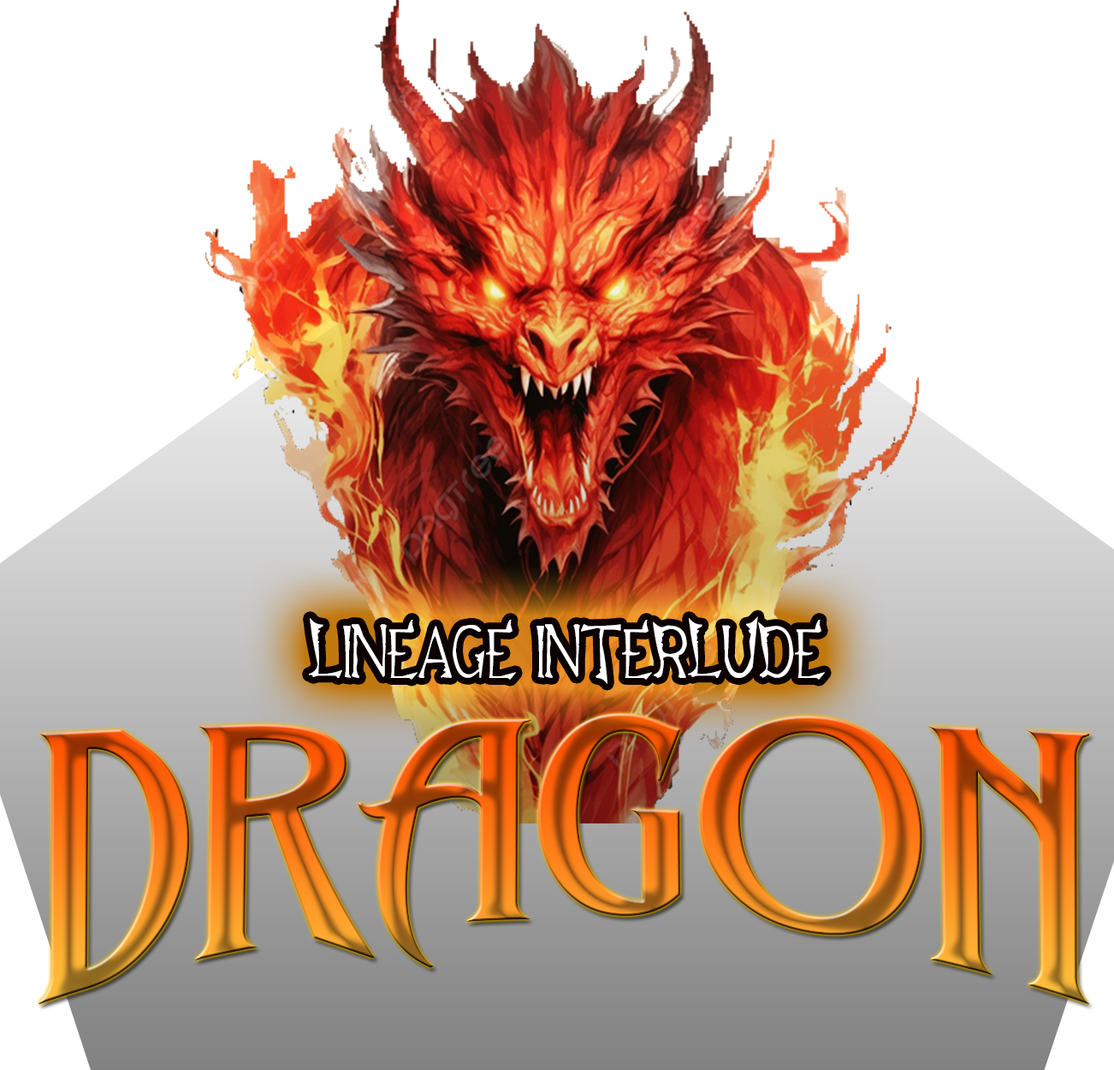
<style>
.page{position:relative;width:1114px;height:1070px;background:#ffffff}
.page>*{position:absolute;margin:0}
.t1{font:72.6px "Lineage2Font";color:#ffffff}
.t2{font:385.1px "TheBlowar-Regular";scale:0.96 1}
</style>
<div class="page">
<p class="t1" style="left:309px;top:616px;width:516px;height:68px">LINEAGE INTERLUDE</p>
<p class="t2" style="left:39px;top:713px;width:1052px;height:292px">DRAGON</p>
</div>
